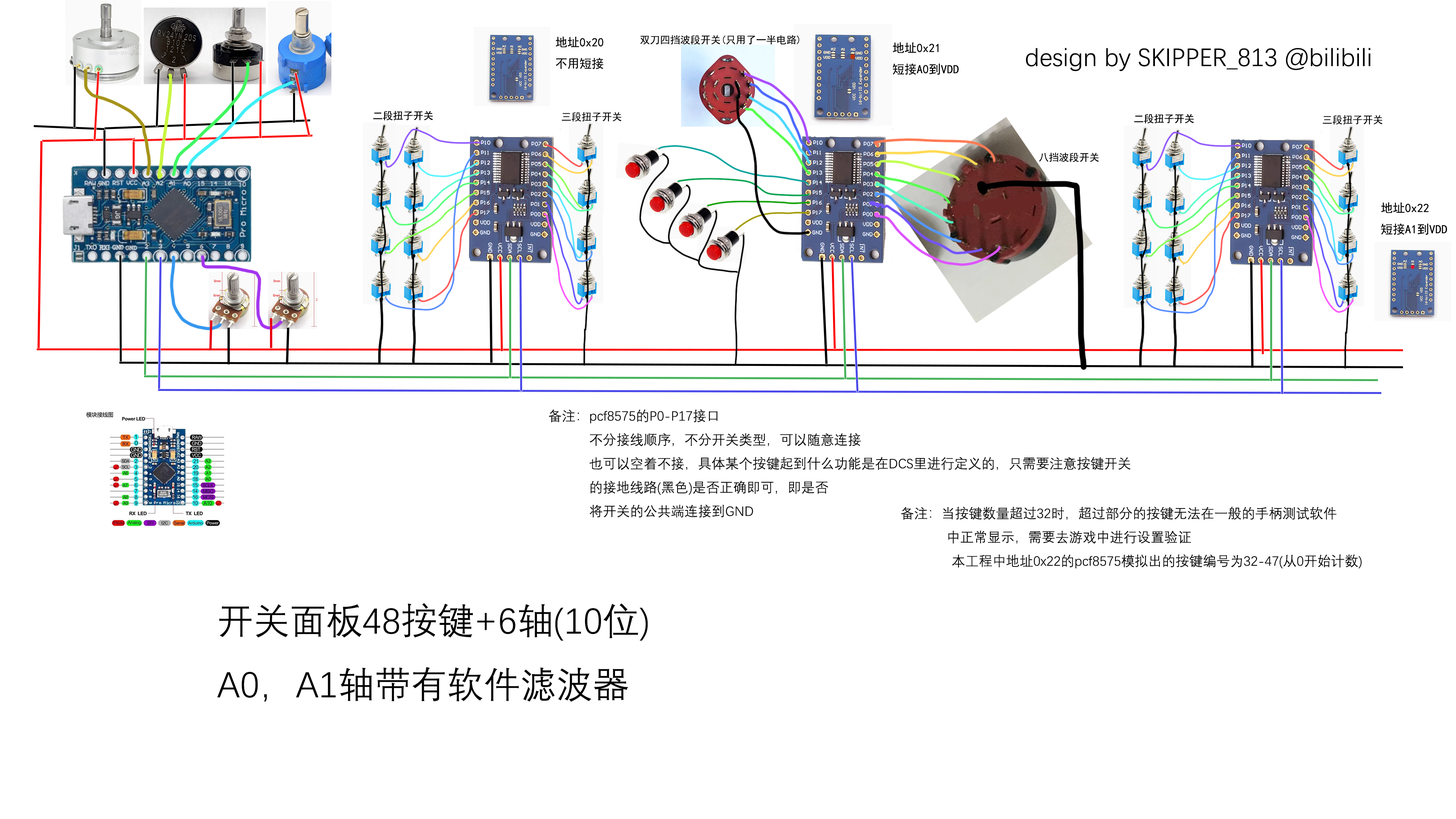
<style>
.page{position:relative;width:1456px;height:819px;background:#ffffff}
.page>*{position:absolute;margin:0}
.t1{font:4.5px "SimHei";color:#000000}
.t2{font:10.1px "SimHei";color:#000000}
.t3{font:12.1px "SimHei";color:#000000}
.t4{font:25.5px "DengXian";color:#000000}
.t5{font:13.6px "DengXian";color:#000000}
.t6{font:36.4px "DengXian";color:#000000}
</style>
<div class="page">
<p class="t1" style="left:555px;top:36px;width:49px;height:33px">地址0x20<br>不用短接</p>
<p class="t2" style="left:640px;top:35px;width:159px;height:10px">双刀四挡波段开关(只用了一半电路)</p>
<p class="t3" style="left:893px;top:42px;width:66px;height:33px">地址0x21<br>短接A0到VDD</p>
<p class="t4" style="left:1026px;top:48px;width:344px;height:23px">design by SKIPPER_813 @bilibili</p>
<p class="t2" style="left:562px;top:112px;width:59px;height:10px">三段扭子开关</p>
<p class="t2" style="left:1323px;top:115px;width:59px;height:10px">三段扭子开关</p>
<p class="t2" style="left:1039px;top:152px;width:60px;height:10px">八挡波段开关</p>
<p class="t3" style="left:1381px;top:202px;width:66px;height:33px">地址0x22<br>短接A1到VDD</p>
<p class="t5" style="left:549px;top:409px;width:582px;height:109px">备注：pcf8575的P0-P17接口<br>        不分接线顺序，不分开关类型，可以随意连接<br>        也可以空着不接，具体某个按键起到什么功能是在DCS里进行定义的，只需要注意按键开关<br>        的接地线路(黑色)是否正确即可，即是否<br>        将开关的公共端连接到GND</p>
<p class="t5" style="left:901px;top:507px;width:461px;height:61px">备注：当按键数量超过32时，超过部分的按键无法在一般的手柄测试软件<br>         中正常显示，需要去游戏中进行设置验证<br>          本工程中地址0x22的pcf8575模拟出的按键编号为32-47(从0开始计数)</p>
<p class="t6" style="left:217px;top:603px;width:431px;height:99px">开关面板48按键+6轴(10位)<br>A0，A1轴带有软件滤波器</p>
</div>
